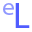
<style>
.page{position:relative;width:32px;height:32px;background:#ffffff}
.page>*{position:absolute;margin:0}
.t1{font:24px "MyriadPro-Regular";color:#9098ff}
.t2{font:36px "MyriadPro-Regular";color:#505cff}
</style>
<div class="page">
<p class="t1" style="left:3px;top:3px;width:11px;height:12px">e</p>
<p class="t2" style="left:15px;top:3px;width:15px;height:25px">L</p>
</div>
